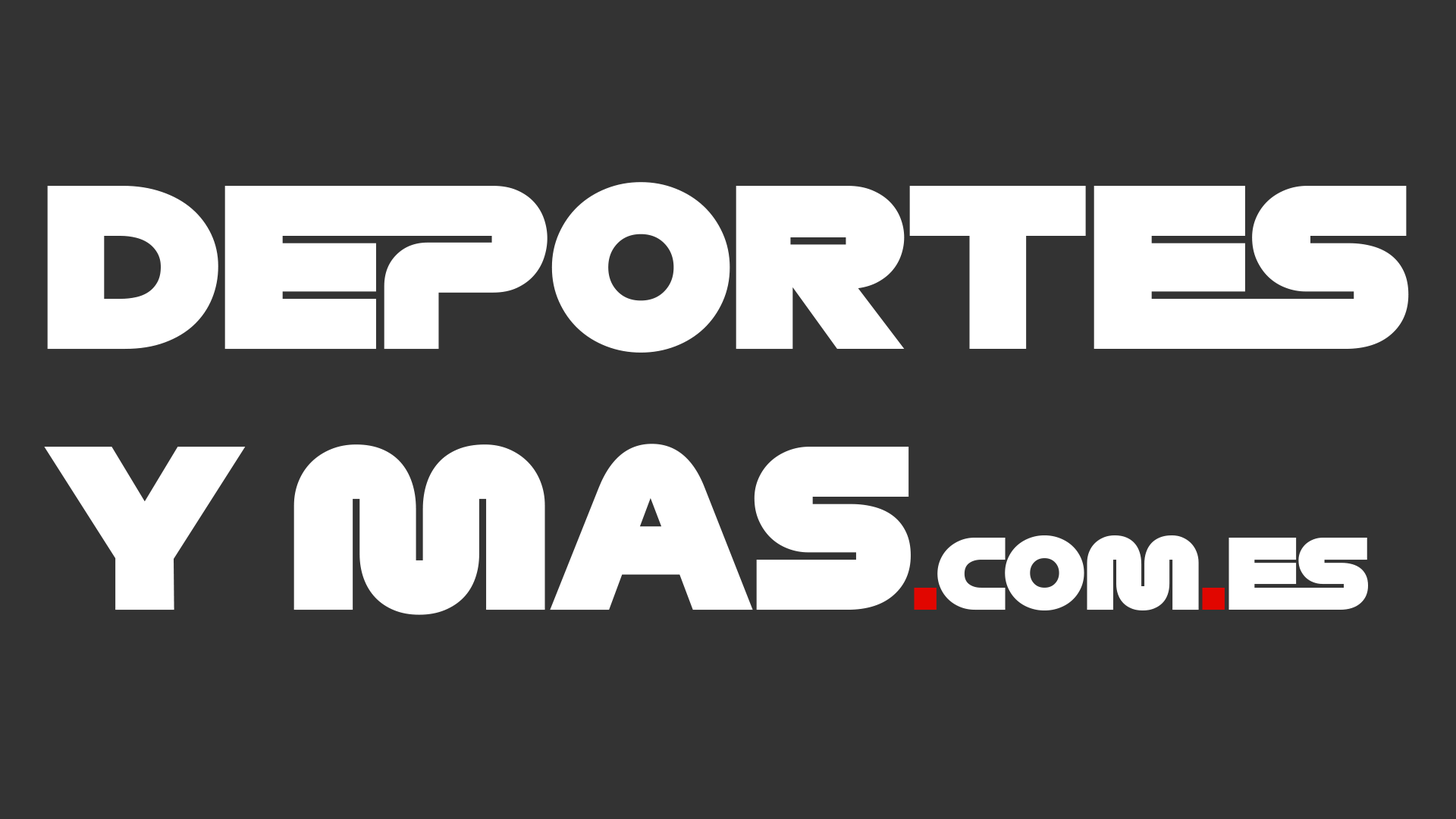
<style>
.page{position:relative;width:1456px;height:819px;background:#333333}
.page>*{position:absolute;margin:0}
.t1{font:217.3px "Formula1-Display-Black";color:#ffffff}
.t2{font:96.6px "Formula1-Display-Black";color:#e10600}
.t3{font:96.6px "Formula1-Display-Black";color:#ffffff}
</style>
<div class="page">
<p class="t1" style="left:44px;top:182px;width:1365px;height:433px">DEPORTES<br>Y MAS<span class="t2">.</span><span class="t3">COM</span><span class="t2">.</span><span class="t3">ES</span></p>
</div>
